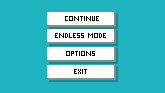
<style>
.page{position:relative;width:165px;height:93px;background:#1fb2bf}
.page>*{position:absolute;margin:0}
.t1{font:8px "Project33-Regular";color:#000000}
</style>
<div class="page">
<p class="t1" style="left:65px;top:16px;width:34px;height:5px">Continue</p>
<p class="t1" style="left:55px;top:33px;width:51px;height:5px">Endless mode</p>
<p class="t1" style="left:66px;top:51px;width:29px;height:5px">Options</p>
<p class="t1" style="left:74px;top:69px;width:13px;height:5px">Exit</p>
</div>
